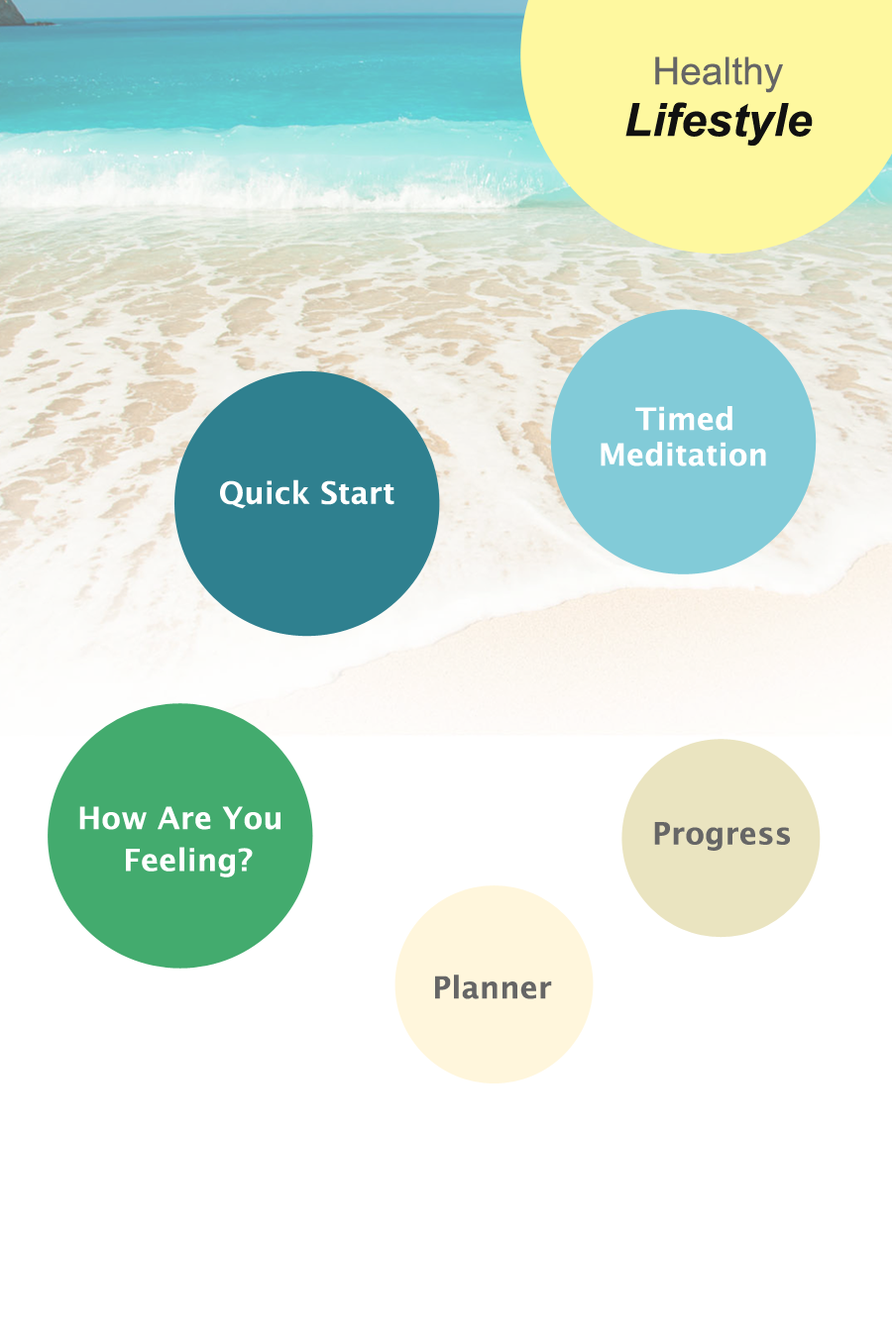
<style>
.page{position:relative;width:892px;height:1337px;background:#ffffff}
.page>*{position:absolute;margin:0}
.t1{font:38.2px "ArialMT";letter-spacing:0.005em;color:#666666}
.t2{font:45.9px "Arial-BoldItalicMT";letter-spacing:0.005em;color:#111111}
.t3{font:30.6px "LucidaSans-Demi";letter-spacing:0.005em;color:#ffffff}
.t4{font:30.6px "LucidaSans-Demi";letter-spacing:0.005em;color:#666666}
</style>
<div class="page">
<p class="t1" style="left:655px;top:56px;width:128px;height:37px">Healthy</p>
<p class="t2" style="left:625px;top:102px;width:187px;height:44px">Lifestyle</p>
<p class="t3" style="left:635px;top:406px;width:97px;height:25px">Timed</p>
<p class="t3" style="left:600px;top:442px;width:166px;height:25px">Meditation</p>
<p class="t3" style="left:220px;top:479px;width:174px;height:30px">Quick Start</p>
<p class="t3" style="left:79px;top:806px;width:201px;height:24px">How Are You</p>
<p class="t4" style="left:654px;top:822px;width:136px;height:29px">Progress</p>
<p class="t3" style="left:126px;top:847px;width:127px;height:31px">Feeling?</p>
<p class="t4" style="left:435px;top:975px;width:117px;height:25px">Planner</p>
</div>
